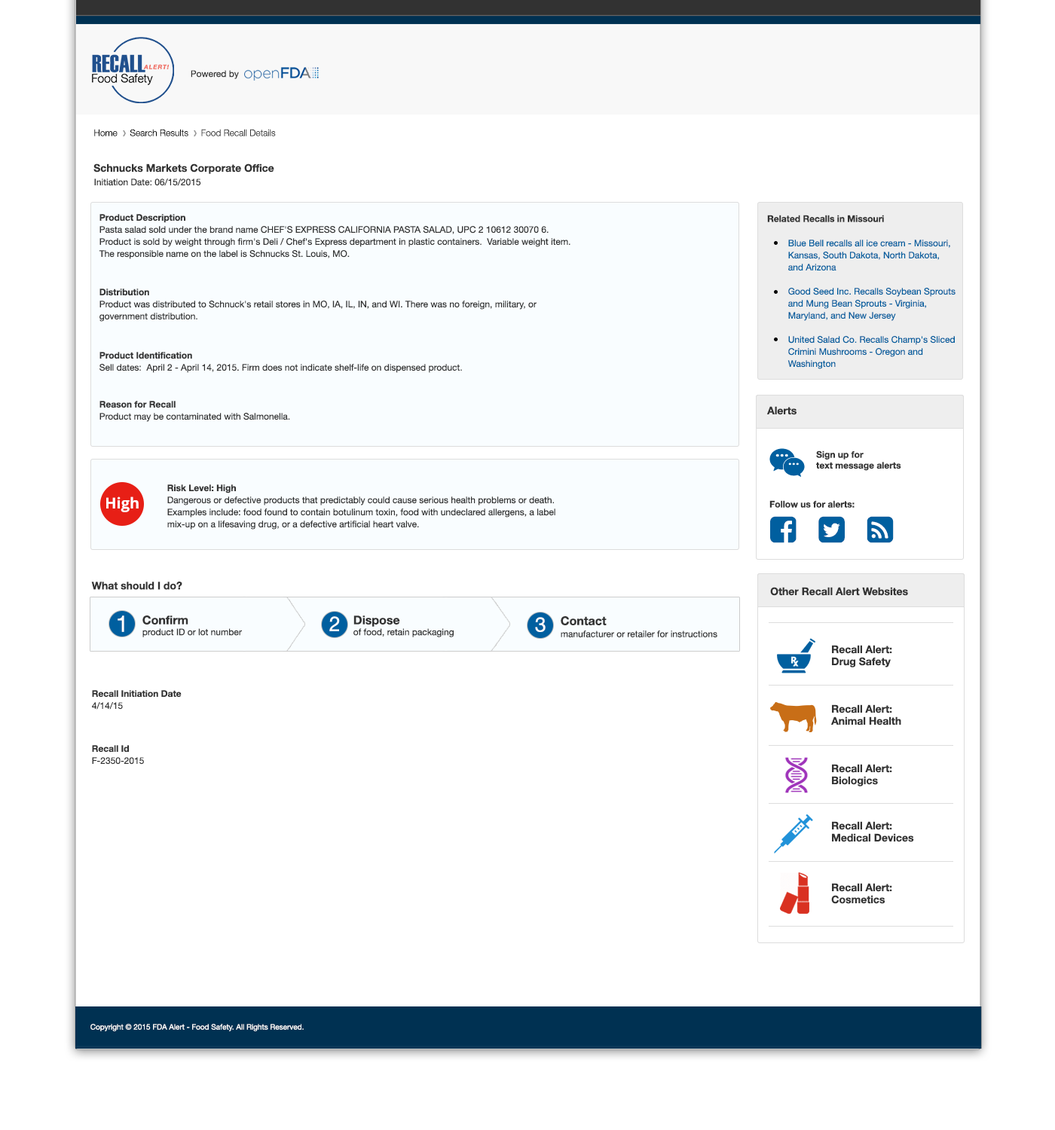
<style>
.page{position:relative;width:1055px;height:1130px;background:#ffffff}
.page>*{position:absolute;margin:0}
.t1{font:9px "HelveticaNeue";color:#333333}
.t2{font:9px "HelveticaNeue-Light";color:#000000}
.t3{font:9px "HelveticaNeue-Light";color:#333333}
.t4{font:10.5px "HelveticaNeue-Bold";color:#333333}
.t5{font:9px/12.1px "HelveticaNeue";color:#333333}
.t6{font:9px/12.1px "HelveticaNeue-Bold";color:#333333}
.t7{font:9px "HelveticaNeue-Bold";color:#333333}
.t8{font:9px/12.1px "HelveticaNeue";color:#005f9f}
.t9{font:22.6px "HelveticaNeue";color:#ffffff}
.t10{font:12.1px "HelveticaNeue-Bold";color:#333333}
.t11{font:20.3px "HelveticaNeue";color:#ffffff}
.t12{font:12.1px/12.1px "HelveticaNeue-Bold";color:#333333}
.t13{font:10.5px/12.1px "HelveticaNeue-Bold";color:#333333}
.t14{font:7.5px "HelveticaNeue";color:#ffffff}
</style>
<div class="page">
<p class="t1" style="left:191px;top:70px;width:48px;height:9px">Powered by</p>
<p class="t2" style="left:94px;top:129px;width:182px;height:7px">Home     Search Results   <span class="t3">  Food Recall Details</span></p>
<p class="t4" style="left:93px;top:164px;width:181px;height:10px">Schnucks Markets Corporate Office</p>
<p class="t1" style="left:94px;top:179px;width:107px;height:7px">Initiation Date: 06/15/2015</p>
<p class="t5" style="left:99px;top:214px;width:471px;height:45px"><span class="t6">Product Description<br></span>Pasta salad sold under the brand name CHEF'S EXPRESS CALIFORNIA PASTA SALAD, UPC 2 10612 30070 6. Product is sold by weight through firm's Deli / Chef's Express department in plastic containers.  Variable weight item. The responsible name on the label is Schnucks St. Louis, MO.</p>
<p class="t7" style="left:767px;top:215px;width:117px;height:7px">Related Recalls in Missouri</p>
<p class="t8" style="left:787px;top:240px;width:168px;height:129px">Blue Bell recalls all ice cream - Missouri, Kansas, South Dakota, North Dakota, and Arizona<br><br>Good Seed Inc. Recalls Soybean Sprouts and Mung Bean Sprouts - Virginia, Maryland, and New Jersey<br><br>United Salad Co. Recalls Champ's Sliced Crimini Mushrooms - Oregon and Washington</p>
<p class="t5" style="left:99px;top:289px;width:438px;height:33px"><span class="t6">Distribution<br></span>Product was distributed to Schnuck's retail stores in MO, IA, IL, IN, and WI. There was no foreign, military, or government distribution.</p>
<p class="t5" style="left:99px;top:352px;width:363px;height:21px"><span class="t6">Product Identification<br></span>Sell dates:  April 2 - April 14, 2015. Firm does not indicate shelf-life on dispensed product.</p>
<p class="t5" style="left:99px;top:401px;width:191px;height:21px"><span class="t6">Reason for Recall<br></span>Product may be contaminated with Salmonella.</p>
<p class="t4" style="left:767px;top:406px;width:29px;height:9px">Alerts</p>
<p class="t7" style="left:816px;top:451px;width:85px;height:20px">Sign up for <br>text message alerts</p>
<p class="t5" style="left:167px;top:485px;width:388px;height:45px"><span class="t6">Risk Level: High<br></span>Dangerous or defective products that predictably could cause serious health problems or death. Examples include: food found to contain botulinum toxin, food with undeclared allergens, a label mix-up on a lifesaving drug, or a defective artificial heart valve.</p>
<p class="t7" style="left:769px;top:500px;width:86px;height:8px">Follow us for alerts:</p>
<p class="t4" style="left:91px;top:582px;width:91px;height:8px">What should I do?</p>
<p class="t4" style="left:770px;top:587px;width:138px;height:9px">Other Recall Alert Websites</p>
<p class="t9" style="left:118px;top:616px;width:6px;height:16px">1</p>
<p class="t1" style="left:142px;top:616px;width:100px;height:21px"><span class="t10">Confirm</span><br>product ID or lot number</p>
<p class="t11" style="left:329px;top:616px;width:11px;height:15px">2</p>
<p class="t1" style="left:353px;top:616px;width:101px;height:21px"><span class="t10">Dispose <br></span>of food, retain packaging</p>
<p class="t11" style="left:535px;top:617px;width:11px;height:15px">3</p>
<p class="t5" style="left:561px;top:616px;width:156px;height:21px"><span class="t12">Contact <br></span>manufacturer or retailer for instructions</p>
<p class="t13" style="left:832px;top:645px;width:60px;height:23px">Recall Alert:<br>Drug Safety</p>
<p class="t6" style="left:92px;top:690px;width:90px;height:20px">Recall Initiation Date<br><span class="t5">4/14/15</span></p>
<p class="t13" style="left:831px;top:705px;width:70px;height:21px">Recall Alert:<br>Animal Health</p>
<p class="t5" style="left:92px;top:745px;width:52px;height:20px"><span class="t6">Recall Id<br></span>F-2350-2015</p>
<p class="t13" style="left:832px;top:764px;width:60px;height:23px">Recall Alert:<br>Biologics</p>
<p class="t13" style="left:832px;top:821px;width:82px;height:21px">Recall Alert:<br>Medical Devices</p>
<p class="t13" style="left:831px;top:883px;width:61px;height:21px">Recall Alert:<br>Cosmetics</p>
<p class="t14" style="left:90px;top:1024px;width:214px;height:8px">Copyright © 2015 FDA Alert - Food Safety. All Rights Reserved.</p>
</div>
